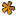
<style>
.page{position:relative;width:16px;height:16px;background:#ffffff}
.page>*{position:absolute;margin:0}
.t1{font:34.5px "PalatinoLinotype-Roman"}
</style>
<div class="page">
<p class="t1" style="left:3px;top:2px;width:12px;height:12px">*</p>
</div>
